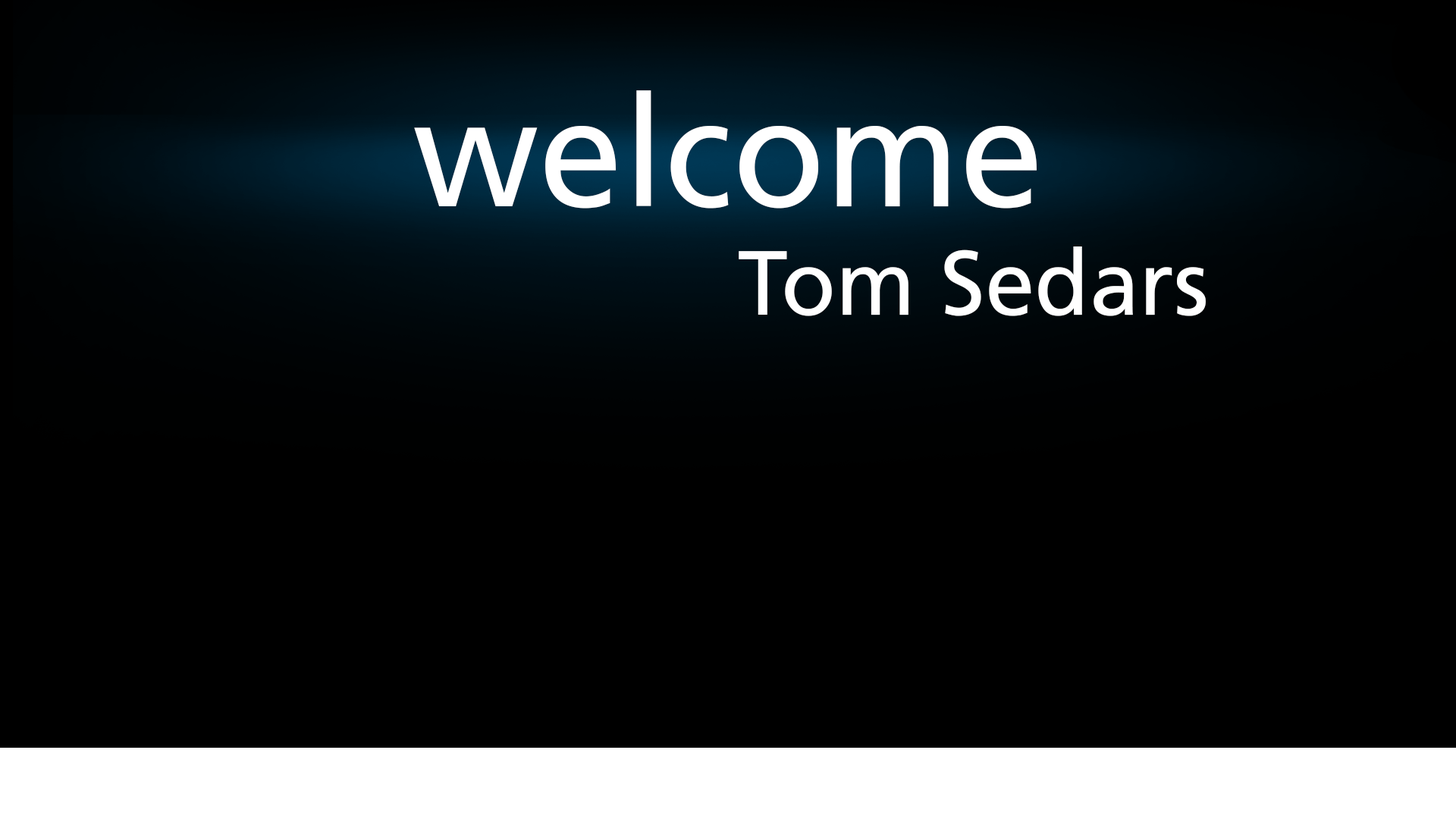
<style>
.page{position:relative;width:1456px;height:819px;background:#000000}
.page>*{position:absolute;margin:0}
.t1{font:154px "FrutigerLTRH";color:#ffffff}
.t2{font:91px "FrutigerLTRH";color:#ffffff}
</style>
<div class="page">
<p class="t1" style="left:414px;top:90px;width:623px;height:119px">welcome</p>
<p class="t2" style="left:739px;top:246px;width:467px;height:70px">Tom Sedars</p>
</div>
